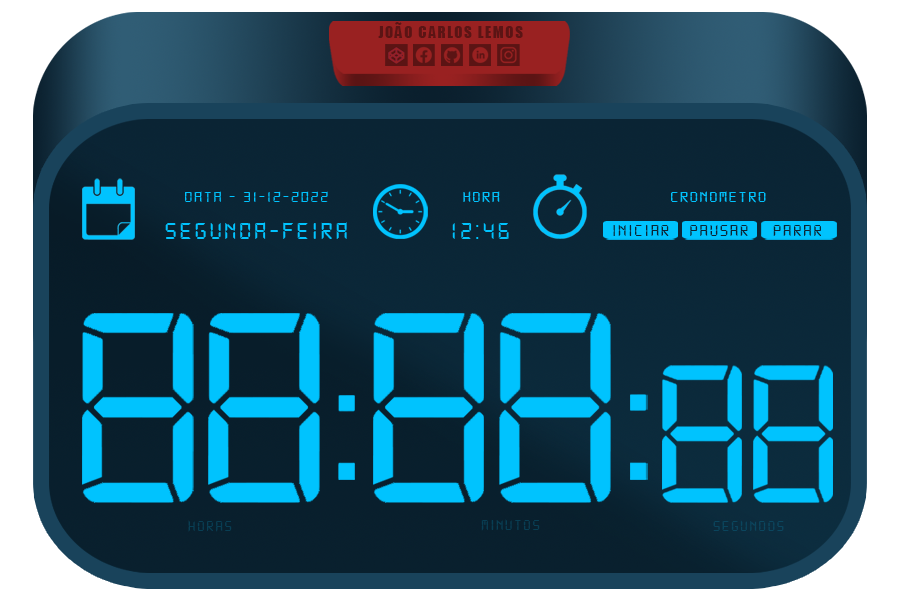
<style>
.page{position:relative;width:900px;height:600px}
.page>*{position:absolute;margin:0}
.t1{font:15.2px "Impact";letter-spacing:0.1em;color:#5b1414}
.t2{font:16.5px "DS-Digital";letter-spacing:0.1em;color:#00c3fe}
.t3{font:25.2px "DS-Digital";letter-spacing:0.1em;color:#00c3fe}
.t4{font:17.1px "DS-Digital";letter-spacing:0.1em;color:#0a2535}
.t5{font:17.1px "DS-Digital";letter-spacing:0.1em;color:#0a2435}
.t6{font:17.1px "DS-Digital";letter-spacing:0.1em;color:#0a2434}
.t7{font:15.5px "DS-Digital";letter-spacing:0.1em;color:#083e54}
.t8{font:15.5px "DS-Digital";letter-spacing:0.1em;color:#0b465e}
</style>
<div class="page">
<p class="t1" style="left:378px;top:22px;width:145px;height:16px">JOÃO CARLOS LEMOS</p>
<p class="t2" style="left:185px;top:191px;width:143px;height:11px">data - 31-12-2022</p>
<p class="t2" style="left:463px;top:191px;width:37px;height:12px">hora</p>
<p class="t2" style="left:671px;top:191px;width:95px;height:12px">cronometro</p>
<p class="t3" style="left:165px;top:222px;width:182px;height:17px">SEGUNDA-feira</p>
<p class="t3" style="left:452px;top:223px;width:57px;height:16px">12:46</p>
<p class="t4" style="left:613px;top:225px;width:56px;height:11px">iniciar</p>
<p class="t5" style="left:690px;top:225px;width:58px;height:11px">pausar</p>
<p class="t6" style="left:773px;top:225px;width:48px;height:11px">parar</p>
<p class="t7" style="left:188px;top:520px;width:44px;height:12px">horas</p>
<p class="t7" style="left:481px;top:519px;width:59px;height:12px">minutos</p>
<p class="t8" style="left:713px;top:520px;width:71px;height:11px">segundos</p>
</div>
